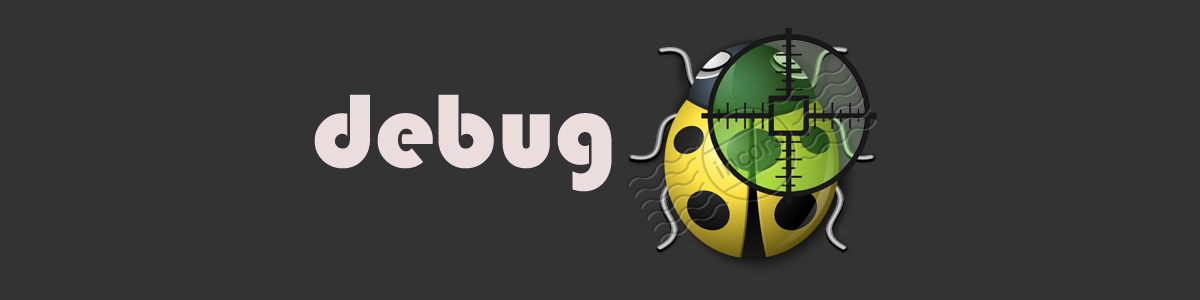
<style>
.page{position:relative;width:1200px;height:300px;background:#333333}
.page>*{position:absolute;margin:0}
.t1{font:108px "STHupo";color:#ebdddd}
</style>
<div class="page">
<p class="t1" style="left:314px;top:94px;width:298px;height:98px">debug</p>
</div>
